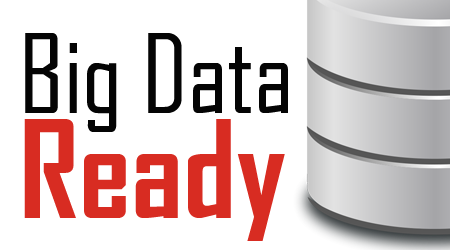
<style>
.page{position:relative;width:450px;height:250px;background:#ffffff}
.page>*{position:absolute;margin:0}
.t1{font:105px/105px "AgencyFB-Reg";color:#040404}
.t2{font:130px/105px "AgencyFB-Bold";color:#d82c22}
</style>
<div class="page">
<p class="t1" style="left:24px;top:33px;width:264px;height:208px">Big Data<br><span class="t2">Ready</span></p>
</div>
